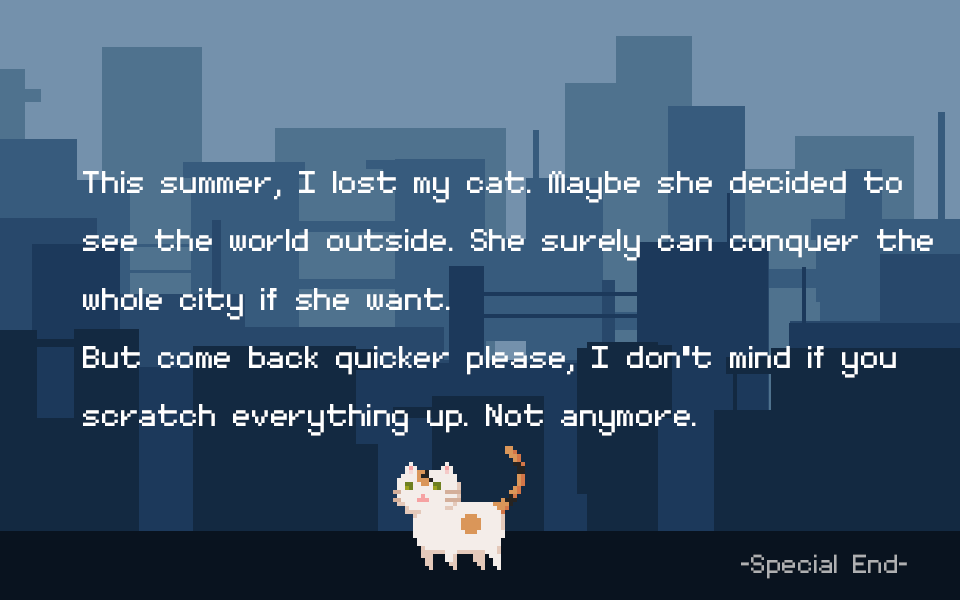
<style>
.page{position:relative;width:960px;height:600px;background:#132941}
.page>*{position:absolute;margin:0}
.t1{font:50px/58.3px "MinimalFont5x7";color:#ffffff}
.t2{font:41.7px "MinimalFont5x7";color:#afb0b2}
</style>
<div class="page">
<p class="t1" style="left:83px;top:171px;width:850px;height:265px">This summer, I lost my cat. Maybe she decided to see the world outside. She surely can conquer the whole city if she want. <br>But come back quicker please, I don't mind if you scratch everything up. Not anymore.</p>
<p class="t2" style="left:741px;top:554px;width:166px;height:25px">-Special End-</p>
</div>
